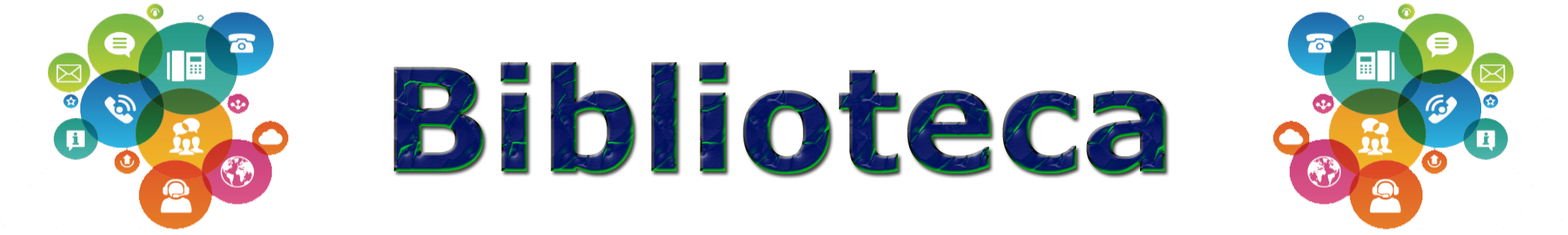
<style>
.page{position:relative;width:1568px;height:235px;background:#ffffff}
.page>*{position:absolute;margin:0}
.t1{font:143.4px "Verdana-Bold"}
</style>
<div class="page">
<p class="t1" style="left:394px;top:62px;width:771px;height:112px">Biblioteca</p>
</div>
